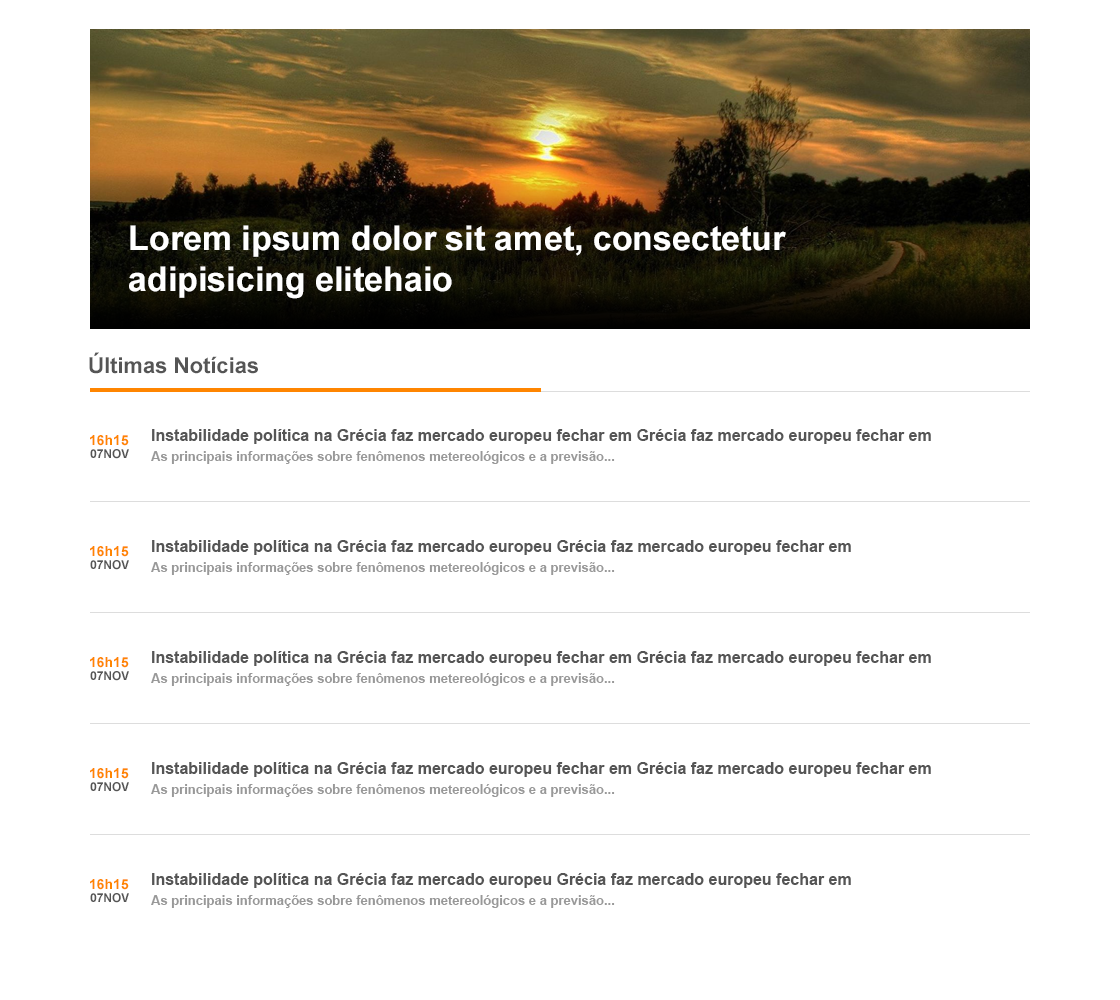
<style>
.page{position:relative;width:1120px;height:1000px;background:#ffffff}
.page>*{position:absolute;margin:0}
.t1{font:34px "Arial-BoldMT";color:#ffffff}
.t2{font:22px "Arial-BoldMT";color:#555555}
.t3{font:14px "Arial-BoldMT";color:#ff8500}
.t4{font:16px "Arial-BoldMT";color:#555555}
.t5{font:12px "Arial-BoldMT";color:#555555}
.t6{font:13px "Arial-BoldMT";color:#999999}
</style>
<div class="page">
<p class="t1" style="left:129px;top:225px;width:657px;height:74px">Lorem ipsum dolor sit amet, consectetur adipisicing elitehaio</p>
<p class="t2" style="left:89px;top:352px;width:169px;height:22px">Últimas Notícias</p>
<p class="t3" style="left:90px;top:435px;width:39px;height:11px">16h15</p>
<p class="t4" style="left:152px;top:429px;width:779px;height:15px">Instabilidade política na Grécia faz mercado europeu fechar em Grécia faz mercado europeu fechar em</p>
<p class="t5" style="left:90px;top:449px;width:39px;height:10px">07NOV</p>
<p class="t6" style="left:151px;top:451px;width:464px;height:13px">As principais informações sobre fenômenos metereológicos e a previsão...</p>
<p class="t4" style="left:152px;top:540px;width:699px;height:15px">Instabilidade política na Grécia faz mercado europeu Grécia faz mercado europeu fechar em</p>
<p class="t3" style="left:90px;top:546px;width:39px;height:11px">16h15</p>
<p class="t5" style="left:90px;top:560px;width:39px;height:10px">07NOV</p>
<p class="t6" style="left:151px;top:562px;width:464px;height:13px">As principais informações sobre fenômenos metereológicos e a previsão...</p>
<p class="t4" style="left:152px;top:651px;width:779px;height:15px">Instabilidade política na Grécia faz mercado europeu fechar em Grécia faz mercado europeu fechar em</p>
<p class="t3" style="left:90px;top:657px;width:39px;height:11px">16h15</p>
<p class="t5" style="left:90px;top:671px;width:39px;height:10px">07NOV</p>
<p class="t6" style="left:151px;top:673px;width:464px;height:13px">As principais informações sobre fenômenos metereológicos e a previsão...</p>
<p class="t3" style="left:90px;top:768px;width:39px;height:11px">16h15</p>
<p class="t4" style="left:152px;top:762px;width:779px;height:15px">Instabilidade política na Grécia faz mercado europeu fechar em Grécia faz mercado europeu fechar em</p>
<p class="t5" style="left:90px;top:782px;width:39px;height:10px">07NOV</p>
<p class="t6" style="left:151px;top:784px;width:464px;height:13px">As principais informações sobre fenômenos metereológicos e a previsão...</p>
<p class="t3" style="left:90px;top:879px;width:39px;height:11px">16h15</p>
<p class="t4" style="left:152px;top:873px;width:699px;height:15px">Instabilidade política na Grécia faz mercado europeu Grécia faz mercado europeu fechar em</p>
<p class="t5" style="left:90px;top:893px;width:39px;height:10px">07NOV</p>
<p class="t6" style="left:151px;top:895px;width:464px;height:13px">As principais informações sobre fenômenos metereológicos e a previsão...</p>
</div>
